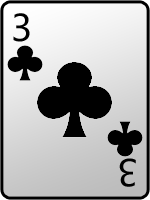
<style>
.page{position:relative;width:150px;height:200px;background:#000000}
.page>*{position:absolute;margin:0}
.t1{font:36px "MicrosoftYaHei";color:#000000}
</style>
<div class="page">
<p class="t1" style="left:13px;top:13px;width:17px;height:29px">3</p>
<p class="t1" style="left:119px;top:158px;width:17px;height:29px;rotate:-180deg">3</p>
</div>
